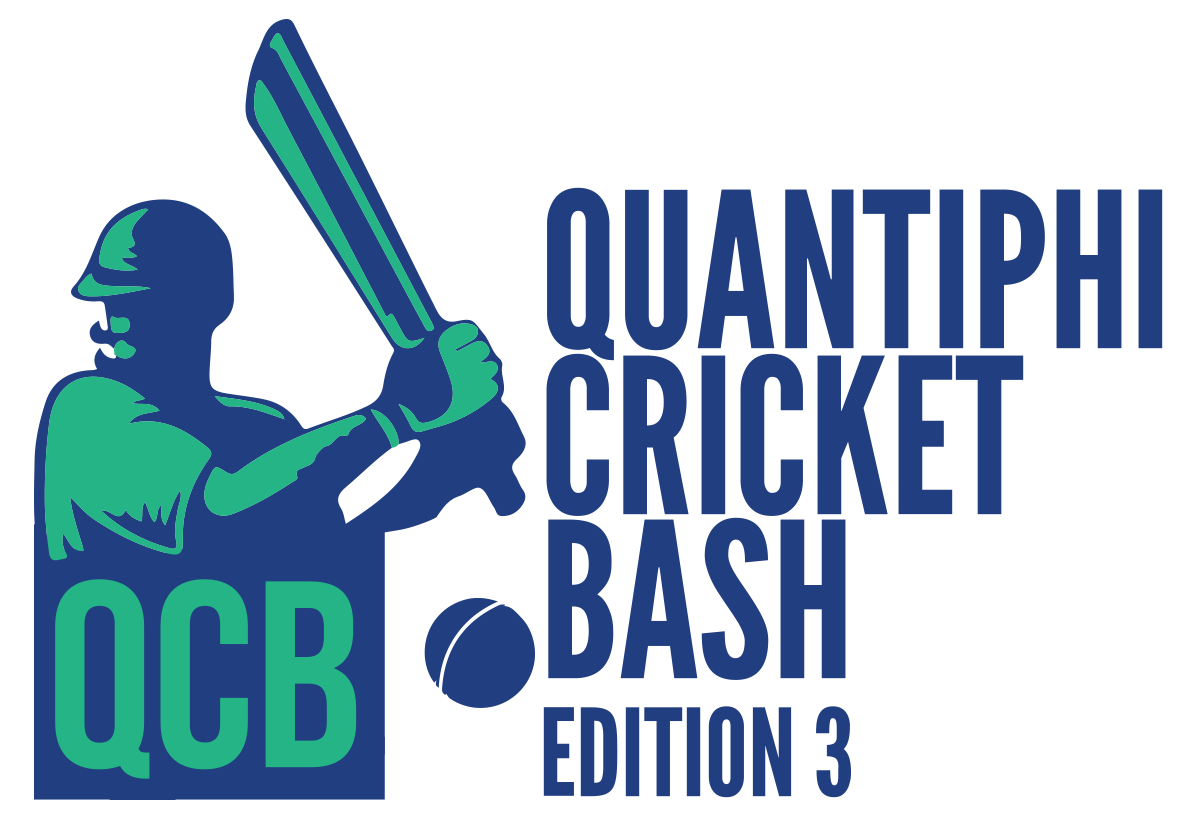
<style>
.page{position:relative;width:1180px;height:820px;background:#ffffff}
.page>*{position:absolute;margin:0}
.t1{font:215.3px "LeagueGothic-Regular";letter-spacing:-0.025em;color:#213e80;font-weight:bold}
.t2{font:120.4px "LeagueGothic-Regular";letter-spacing:-0.025em;color:#213e80;font-weight:bold}
</style>
<div class="page">
<p class="t1" style="left:547px;top:187px;width:616px;height:174px">QUANTIPHI</p>
<p class="t1" style="left:546px;top:353px;width:478px;height:163px">CRICKET</p>
<p class="t1" style="left:548px;top:517px;width:298px;height:163px">BASH</p>
<p class="t2" style="left:543px;top:706px;width:308px;height:92px">EDITION 3</p>
</div>
